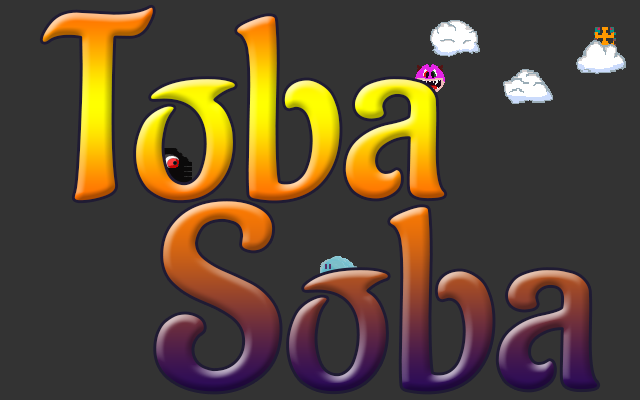
<style>
.page{position:relative;width:640px;height:400px;background:#333333}
.page>*{position:absolute;margin:0}
.t1{font:256px "Aladin-Regular"}
</style>
<div class="page">
<p class="t1" style="left:42px;top:7px;width:403px;height:194px">Toba</p>
<p class="t1" style="left:156px;top:201px;width:442px;height:191px">Soba</p>
</div>
